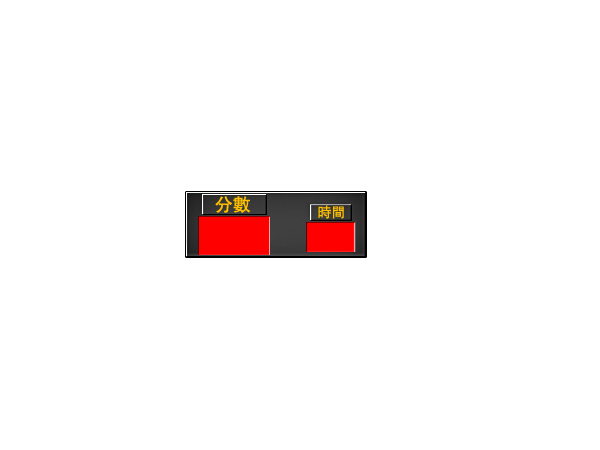
<style>
.page{position:relative;width:600px;height:450px;background:#ffffff}
.page>*{position:absolute;margin:0}
.t1{font:18px "AdobeHeitiStd-Regular";color:#febf00}
.t2{font:14px "AdobeHeitiStd-Regular";color:#febf00}
</style>
<div class="page">
<p class="t1" style="left:215px;top:196px;width:36px;height:17px">分數</p>
<p class="t2" style="left:318px;top:205px;width:26px;height:14px">時間</p>
</div>
